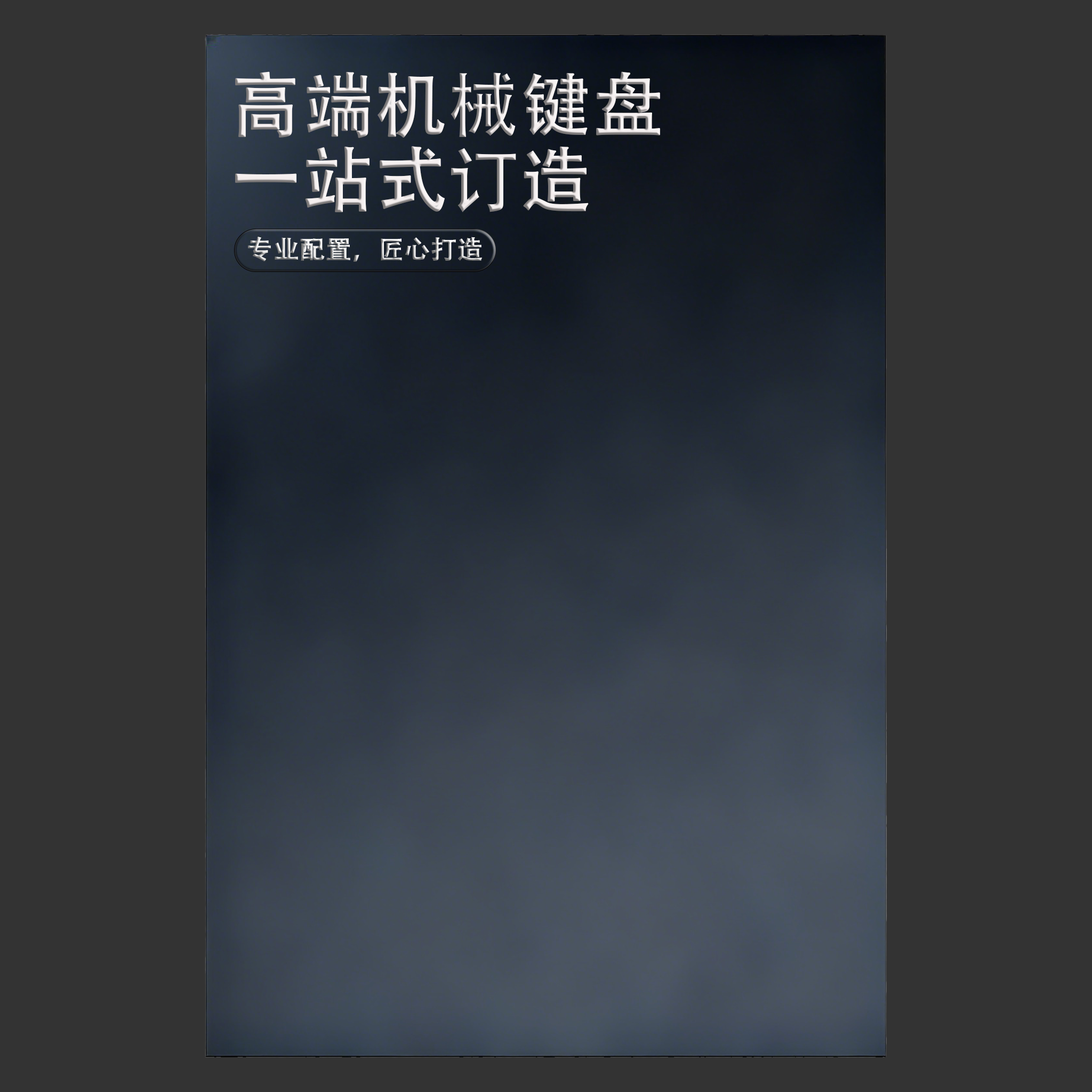
<style>
.page{position:relative;width:1092px;height:1092px;background:#333333}
.page>*{position:absolute;margin:0}
.t1{font:70.6px/74.6px "AdobeHeitiStd-Regular";font-weight:bold}
.t2{font:25.6px "AdobeHeitiStd-Regular";font-weight:bold}
</style>
<div class="page">
<p class="t1" style="left:235px;top:71px;width:425px;height:141px">高端机械键盘<br>一站式订造</p>
<p class="t2" style="left:248px;top:237px;width:234px;height:25px">专业配置，匠心打造</p>
</div>
